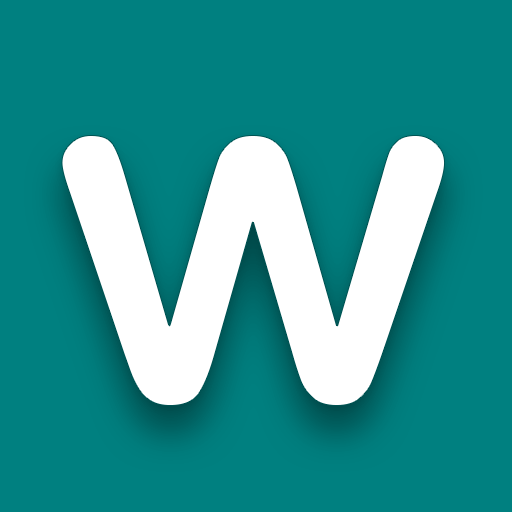
<style>
.page{position:relative;width:512px;height:512px;background:#008080}
.page>*{position:absolute;margin:0}
.t1{font:500px "ArialRoundedMTBold";color:#ffffff}
</style>
<div class="page">
<p class="t1" style="left:61px;top:135px;width:385px;height:271px">w</p>
</div>
